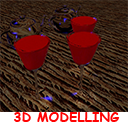
<style>
.page{position:relative;width:128px;height:128px}
.page>*{position:absolute;margin:0}
.t1{font:13.3px "ComicSansMS-Bold";color:#fe0303}
</style>
<div class="page">
<p class="t1" style="left:14px;top:112px;width:106px;height:10px">3D MODELLING</p>
</div>
